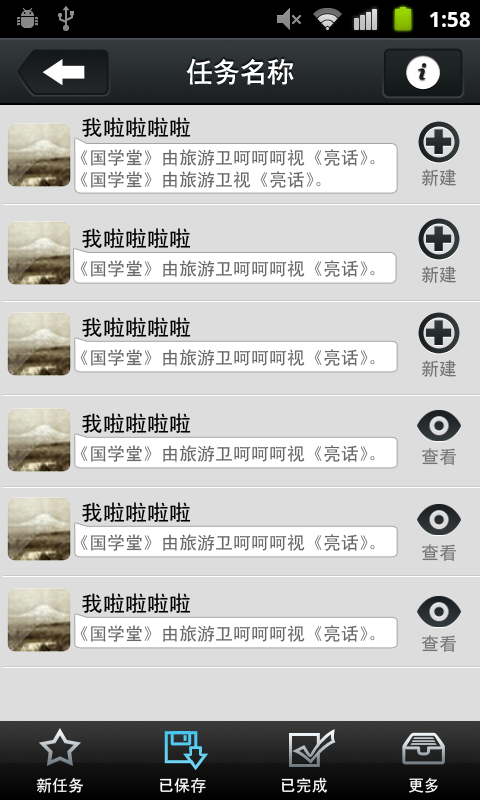
<style>
.page{position:relative;width:480px;height:800px;background:#dddddd}
.page>*{position:absolute;margin:0}
.t1{font:27px "CTCuHeiSJ";color:#ffffff}
.t2{font:22px "SimHei";color:#000000}
.t3{font:18px "SimHei";color:#676767}
.t4{font:18px "SimHei";color:#747272}
.t5{font:16px "SimHei";color:#ffffff}
</style>
<div class="page">
<p class="t1" style="left:186px;top:58px;width:108px;height:27px">任务名称</p>
<p class="t2" style="left:82px;top:117px;width:109px;height:20px">我啦啦啦啦</p>
<p class="t3" style="left:80px;top:149px;width:295px;height:17px">《国学堂》由旅游卫呵呵呵视《亮话》。</p>
<p class="t3" style="left:80px;top:171px;width:241px;height:17px">《国学堂》由旅游卫视《亮话》。</p>
<p class="t4" style="left:422px;top:169px;width:34px;height:17px">新建</p>
<p class="t2" style="left:82px;top:228px;width:109px;height:20px">我啦啦啦啦</p>
<p class="t3" style="left:80px;top:260px;width:295px;height:17px">《国学堂》由旅游卫呵呵呵视《亮话》。</p>
<p class="t4" style="left:422px;top:266px;width:34px;height:17px">新建</p>
<p class="t2" style="left:82px;top:317px;width:109px;height:20px">我啦啦啦啦</p>
<p class="t3" style="left:80px;top:349px;width:295px;height:17px">《国学堂》由旅游卫呵呵呵视《亮话》。</p>
<p class="t4" style="left:422px;top:360px;width:34px;height:17px">新建</p>
<p class="t2" style="left:82px;top:413px;width:109px;height:20px">我啦啦啦啦</p>
<p class="t3" style="left:80px;top:445px;width:295px;height:17px">《国学堂》由旅游卫呵呵呵视《亮话》。</p>
<p class="t4" style="left:422px;top:448px;width:34px;height:17px">查看</p>
<p class="t2" style="left:82px;top:502px;width:109px;height:20px">我啦啦啦啦</p>
<p class="t3" style="left:80px;top:534px;width:295px;height:17px">《国学堂》由旅游卫呵呵呵视《亮话》。</p>
<p class="t4" style="left:422px;top:544px;width:34px;height:17px">查看</p>
<p class="t2" style="left:82px;top:593px;width:109px;height:20px">我啦啦啦啦</p>
<p class="t3" style="left:80px;top:625px;width:295px;height:17px">《国学堂》由旅游卫呵呵呵视《亮话》。</p>
<p class="t4" style="left:422px;top:635px;width:34px;height:17px">查看</p>
<p class="t5" style="left:36px;top:778px;width:47px;height:15px">新任务</p>
<p class="t5" style="left:160px;top:778px;width:46px;height:15px">已保存</p>
<p class="t5" style="left:281px;top:777px;width:46px;height:16px">已完成</p>
<p class="t5" style="left:409px;top:777px;width:29px;height:16px">更多</p>
</div>
